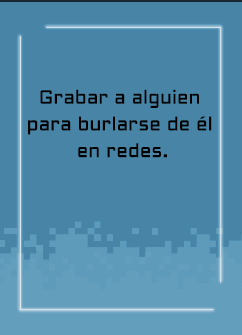
<style>
.page{position:relative;width:242px;height:335px;background:#4784a5}
.page>*{position:absolute;margin:0}
.t1{font:19.2px/26.7px "Aldrich-Regular";letter-spacing:0.005em;color:#000000}
</style>
<div class="page">
<p class="t1" style="left:28px;top:89px;width:184px;height:69px;text-align:center">Grabar a alguien <br>para burlarse de él <br>en redes.</p>
</div>
